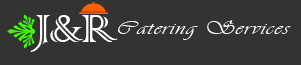
<style>
.page{position:relative;width:301px;height:65px;background:#333333}
.page>*{position:absolute;margin:0}
.t1{font:51.8px "ColonnaMT";letter-spacing:-0.04em;color:#ffffff;text-transform:uppercase}
.t2{font:20px "Vivaldii";letter-spacing:0.04em;color:#ffffff;scale:1.27 1}
</style>
<div class="page">
<p class="t1" style="left:30px;top:15px;width:88px;height:37px">j&amp;r</p>
<p class="t2" style="left:118px;top:20px;width:173px;height:20px">Catering Services</p>
</div>
